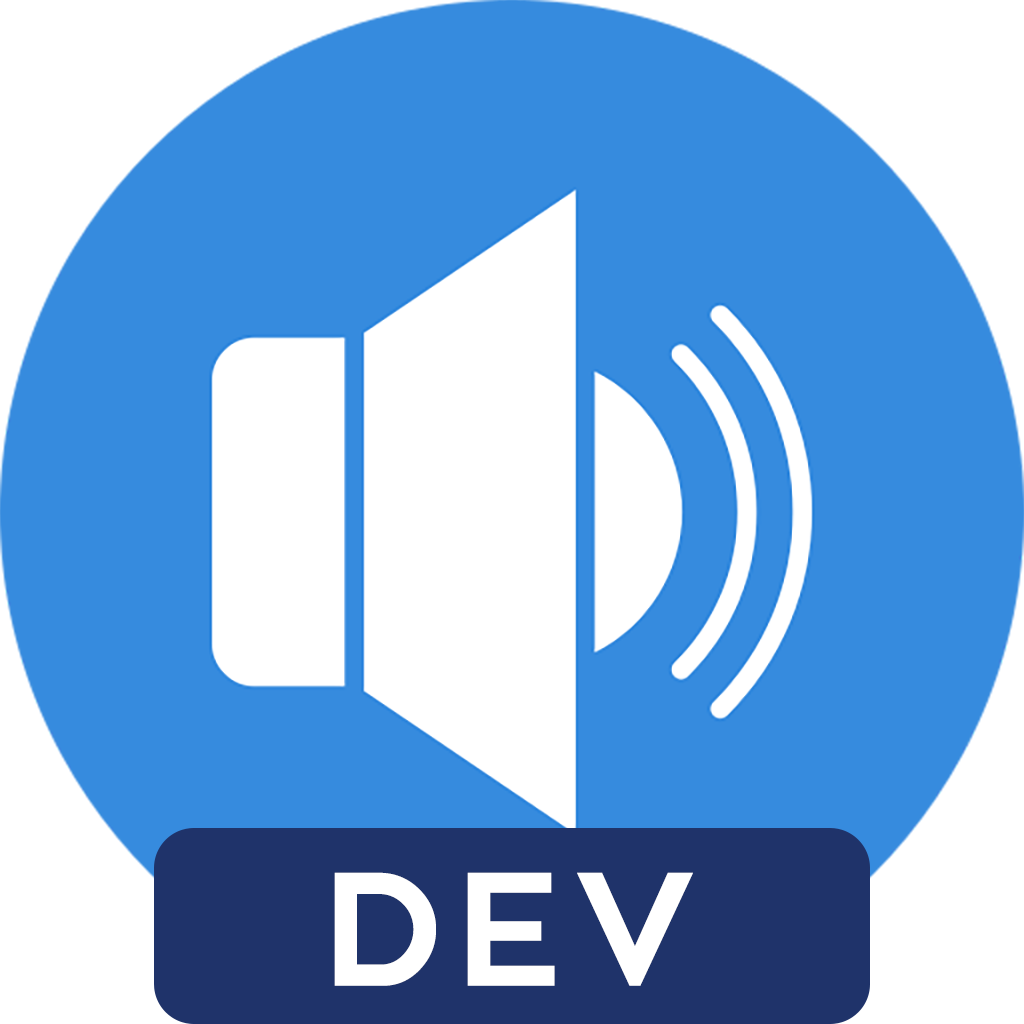
<style>
.page{position:relative;width:1024px;height:1024px;background:#368bde}
.page>*{position:absolute;margin:0}
.t1{font:160px "ZonaPro-Bold";letter-spacing:0.08em;color:#ffffff}
</style>
<div class="page">
<p class="t1" style="left:334px;top:872px;width:359px;height:114px">DEV</p>
</div>
